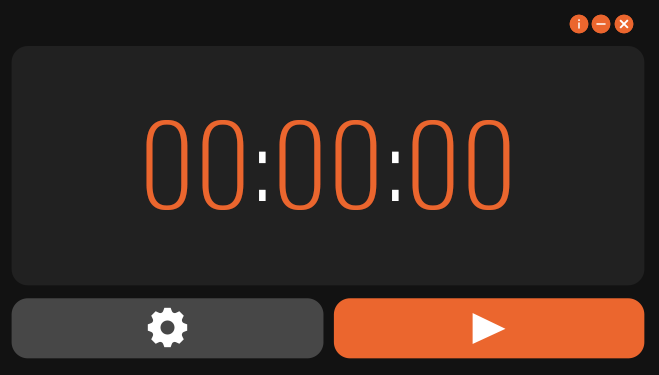
<style>
.page{position:relative;width:659px;height:375px;background:#212121}
.page>*{position:absolute;margin:0}
.t1{font:108.3px "Oswald-ExtraLight";color:#ec662e}
.t2{font:108.3px "Oswald-ExtraLight";color:#ffffff}
</style>
<div class="page">
<p class="t1" style="left:146px;top:120px;width:364px;height:90px">00<span class="t2">:</span>00<span class="t2">:</span>00</p>
</div>
